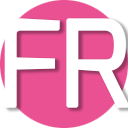
<style>
.page{position:relative;width:128px;height:128px;background:#ffffff}
.page>*{position:absolute;margin:0}
.t1{font:116.7px "Exo-Regular";letter-spacing:-0.04em;color:#ffffff;font-weight:bold}
</style>
<div class="page">
<p class="t1" style="left:4px;top:18px;width:125px;height:90px">FR</p>
</div>
